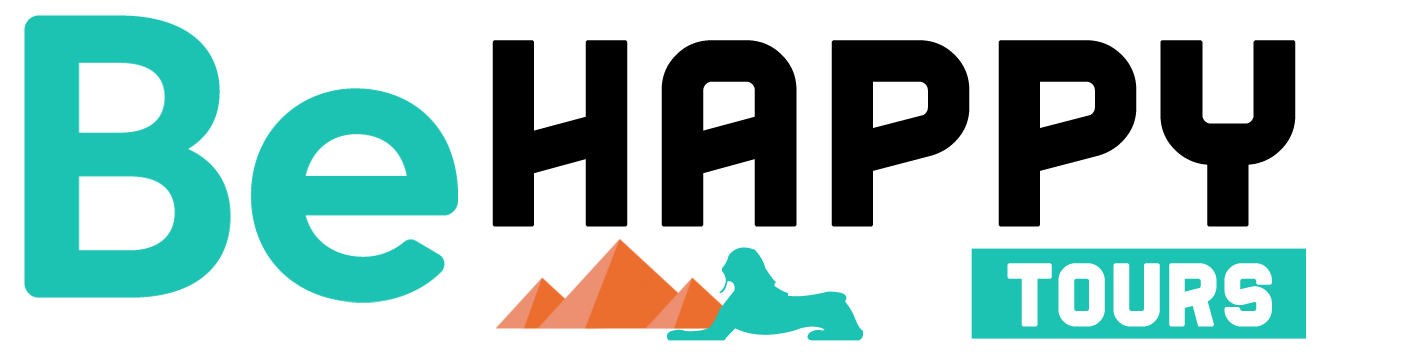
<style>
.page{position:relative;width:1417px;height:352px;background:#ffffff}
.page>*{position:absolute;margin:0}
.t1{font:385.8px "AraHamahAlislam-Regular";color:#000000;font-weight:bold}
.t2{font:127px "AraHamahAlislam-Regular";color:#ffffff;font-weight:bold}
</style>
<div class="page">
<p class="t1" style="left:492px;top:40px;width:804px;height:187px">HAPPY</p>
<p class="t2" style="left:1007px;top:263px;width:265px;height:64px">Tours</p>
</div>
